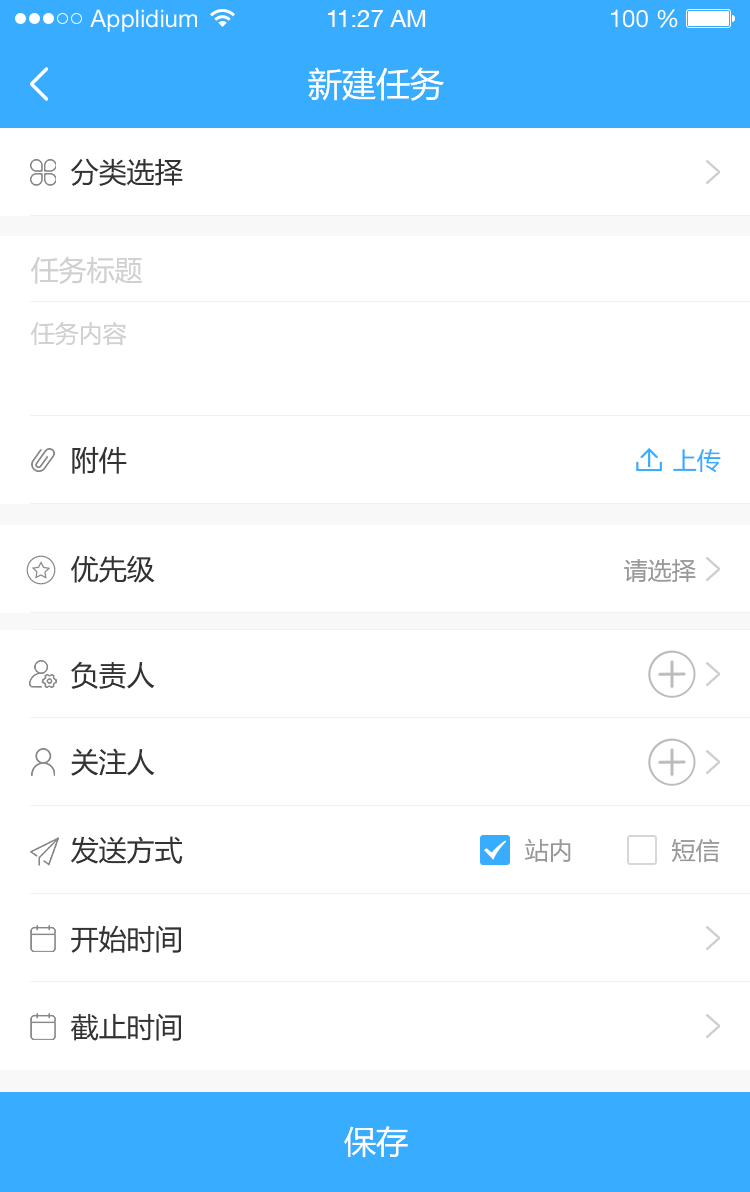
<style>
.page{position:relative;width:750px;height:1192px;background:#ffffff}
.page>*{position:absolute;margin:0}
.t1{font:24px "HelveticaNeueLTStd-Roman";color:#ffffff}
.t2{font:24px "HelveticaNeueCE-Roman";color:#ffffff}
.t3{font:34px "MicrosoftYaHei";color:#ffffff}
.t4{font:28px "MicrosoftYaHei";color:#333333}
.t5{font:28px "MicrosoftYaHei";color:#d0d0d0}
.t6{font:24px "MicrosoftYaHei";color:#d0d0d0}
.t7{font:24px "MicrosoftYaHei";color:#38adff}
.t8{font:24px "MicrosoftYaHei";color:#999999}
.t9{font:32px "MicrosoftYaHei";color:#ffffff}
</style>
<div class="page">
<p class="t1" style="left:90px;top:9px;width:107px;height:23px">Applidium</p>
<p class="t2" style="left:328px;top:10px;width:98px;height:17px">11:27 AM</p>
<p class="t1" style="left:611px;top:9px;width:67px;height:19px">100 %</p>
<p class="t3" style="left:308px;top:67px;width:136px;height:34px">新建任务</p>
<p class="t4" style="left:71px;top:158px;width:112px;height:28px">分类选择</p>
<p class="t5" style="left:31px;top:256px;width:111px;height:28px">任务标题</p>
<p class="t6" style="left:31px;top:321px;width:96px;height:25px">任务内容</p>
<p class="t4" style="left:72px;top:446px;width:55px;height:28px">附件</p>
<p class="t7" style="left:673px;top:449px;width:48px;height:23px">上传</p>
<p class="t4" style="left:71px;top:555px;width:84px;height:28px">优先级</p>
<p class="t8" style="left:624px;top:559px;width:72px;height:23px">请选择</p>
<p class="t4" style="left:71px;top:661px;width:84px;height:28px">负责人</p>
<p class="t4" style="left:71px;top:748px;width:84px;height:28px">关注人</p>
<p class="t4" style="left:71px;top:836px;width:112px;height:28px">发送方式</p>
<p class="t8" style="left:525px;top:839px;width:46px;height:23px">站内</p>
<p class="t8" style="left:671px;top:839px;width:49px;height:24px">短信</p>
<p class="t4" style="left:71px;top:925px;width:110px;height:28px">开始时间</p>
<p class="t4" style="left:71px;top:1013px;width:110px;height:28px">截止时间</p>
<p class="t9" style="left:344px;top:1126px;width:64px;height:32px">保存</p>
</div>
